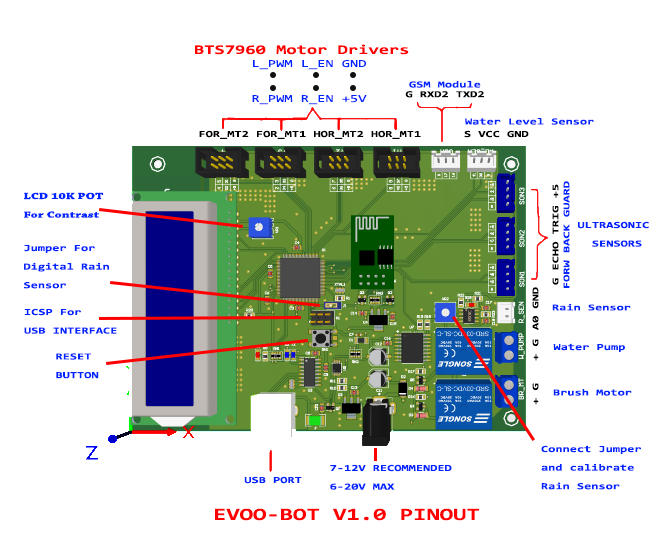
<style>
.page{position:relative;width:667px;height:543px;background:#ffffff}
.page>*{position:absolute;margin:0}
.t1{font:13.3px "Consolas-Bold";color:#ff0000;scale:1.4 1}
.t2{font:10.7px "Consolas";color:#0024ff;scale:1.4 1}
.t3{font:9.3px "Consolas-Bold";color:#0024ff;scale:1.4 1}
.t4{font:9.3px "Consolas-Bold";color:#000000;scale:1.4 1}
.t5{font:9px "Consolas-Bold";color:#000000;scale:1.47 1}
.t6{font:9px "Consolas-Bold";color:#0024ff;scale:1.46 1}
.t7{font:9.3px "ChaparralPro-Bold";color:#0024ff;scale:1.4 1}
.t8{font:9px "Consolas-Bold";color:#000000;scale:1.45 1}
.t9{font:9px "Consolas-Bold";color:#000000;scale:1.49 1}
.t10{font:17.3px "Consolas-Bold";color:#ff0000;scale:1.4 1}
</style>
<div class="page">
<p class="t1" style="left:195px;top:44px;width:214px;height:11px">BTS7960 Motor Drivers</p>
<p class="t2" style="left:253px;top:60px;width:113px;height:10px">L_PWM L_EN GND</p>
<p class="t3" style="left:409px;top:81px;width:72px;height:7px">GSM Module</p>
<p class="t2" style="left:252px;top:95px;width:115px;height:10px">R_PWM R_EN +5V</p>
<p class="t4" style="left:405px;top:91px;width:79px;height:7px">G RXD2 TXD2</p>
<p class="t3" style="left:465px;top:118px;width:129px;height:7px">Water Level Sensor</p>
<p class="t4" style="left:199px;top:130px;width:222px;height:9px">FOR_MT2 FOR_MT1 HOR_MT2 HOR_MT1</p>
<p class="t4" style="left:464px;top:130px;width:65px;height:8px">S VCC GND</p>
<p class="t5" style="left:552px;top:184px;width:7px;height:101px;rotate:-90deg">G ECHO TRIG +5</p>
<p class="t6" style="left:563px;top:181px;width:7px;height:107px;rotate:-90deg">FORW BACK GUARD</p>
<p class="t7" style="left:24px;top:192px;width:80px;height:26px">LCD 10K POT<br>For Contrast</p>
<p class="t3" style="left:578px;top:221px;width:71px;height:26px">ULTRASONIC<br>  SENSORS</p>
<p class="t3" style="left:24px;top:245px;width:85px;height:44px">Jumper For<br>Digital Rain<br>Sensor</p>
<p class="t8" style="left:532px;top:287px;width:7px;height:43px;rotate:-90deg">A0 GND</p>
<p class="t6" style="left:552px;top:303px;width:79px;height:8px">Rain Sensor</p>
<p class="t3" style="left:24px;top:308px;width:93px;height:26px">ICSP For <br>USB INTERFACE</p>
<p class="t9" style="left:532px;top:339px;width:7px;height:66px;rotate:-90deg">+ G   + G</p>
<p class="t3" style="left:56px;top:353px;width:43px;height:26px">RESET <br>BUTTON</p>
<p class="t3" style="left:553px;top:343px;width:72px;height:9px">Water Pump</p>
<p class="t3" style="left:553px;top:389px;width:79px;height:7px">Brush Motor</p>
<p class="t3" style="left:541px;top:445px;width:101px;height:45px">Connect Jumper <br>and calibrate <br>Rain Sensor</p>
<p class="t3" style="left:330px;top:464px;width:122px;height:26px">7-12V RECOMMENDED<br>6-20V MAX</p>
<p class="t3" style="left:244px;top:476px;width:58px;height:8px">USB PORT</p>
<p class="t10" style="left:215px;top:508px;width:264px;height:13px">EVOO-BOT V1.0 PINOUT</p>
</div>
